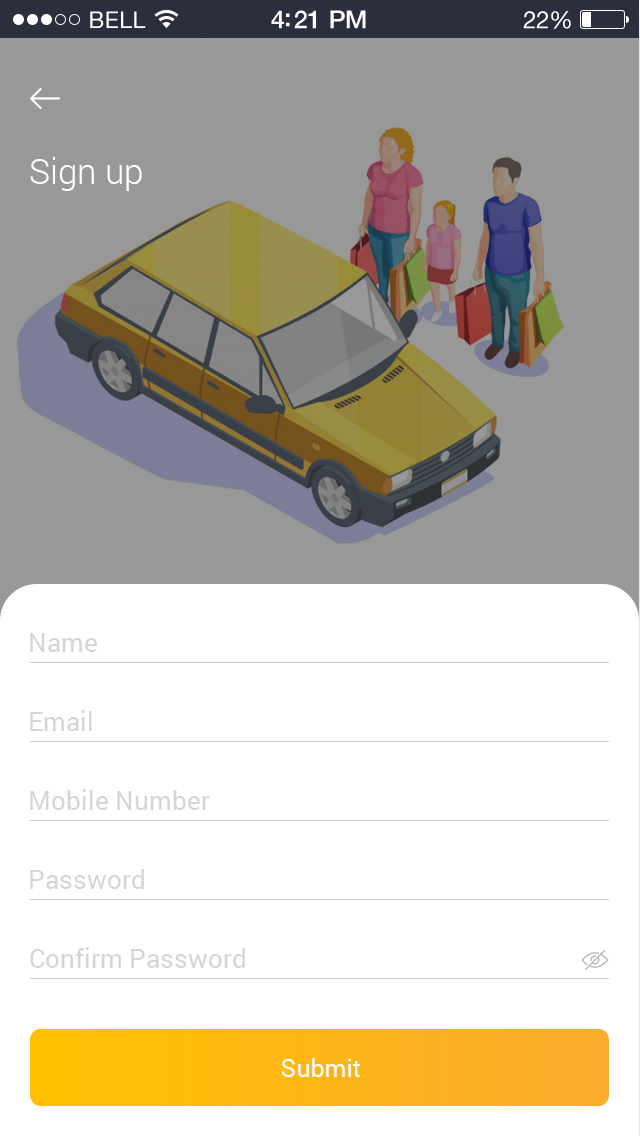
<style>
.page{position:relative;width:640px;height:1136px;background:#ffffff}
.page>*{position:absolute;margin:0}
.t1{font:35px "Roboto-Light";color:#ffffff}
.t2{font:26px "Roboto-Regular";color:#d5d5d5}
.t3{font:25px "Roboto-Regular";color:#ffffff}
</style>
<div class="page">
<p class="t1" style="left:30px;top:157px;width:112px;height:34px">Sign up</p>
<p class="t2" style="left:30px;top:633px;width:67px;height:19px">Name</p>
<p class="t2" style="left:30px;top:710px;width:62px;height:21px">Email</p>
<p class="t2" style="left:30px;top:789px;width:180px;height:21px">Mobile Number</p>
<p class="t2" style="left:30px;top:869px;width:114px;height:20px">Password</p>
<p class="t2" style="left:30px;top:947px;width:215px;height:21px">Confirm Password</p>
<p class="t3" style="left:281px;top:1058px;width:79px;height:19px">Submit</p>
</div>
